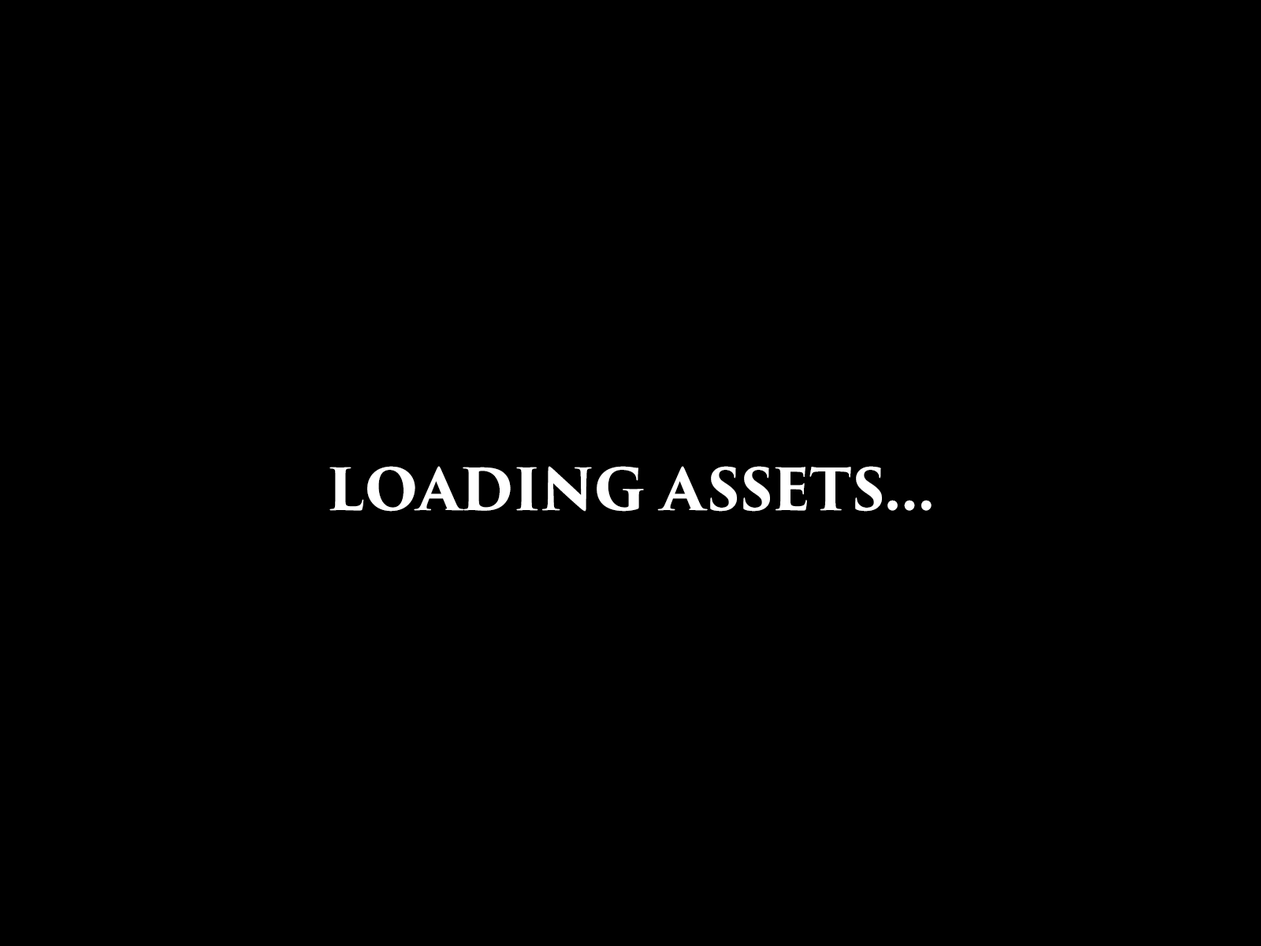
<style>
.page{position:relative;width:1261px;height:946px;background:#000000}
.page>*{position:absolute;margin:0}
.t1{font:56.7px "TrajanPro3-Bold";color:#ffffff}
</style>
<div class="page">
<p class="t1" style="left:329px;top:466px;width:603px;height:45px">LOADING ASSETS...</p>
</div>
